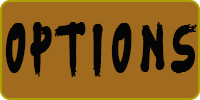
<style>
.page{position:relative;width:200px;height:100px;background:#a16b1f}
.page>*{position:absolute;margin:0}
.t1{font:82.6px "Fujimaru-Regular";color:#050505;font-weight:bold;scale:0.6 1}
</style>
<div class="page">
<p class="t1" style="left:5px;top:22px;width:192px;height:55px">OPTIONS</p>
</div>
